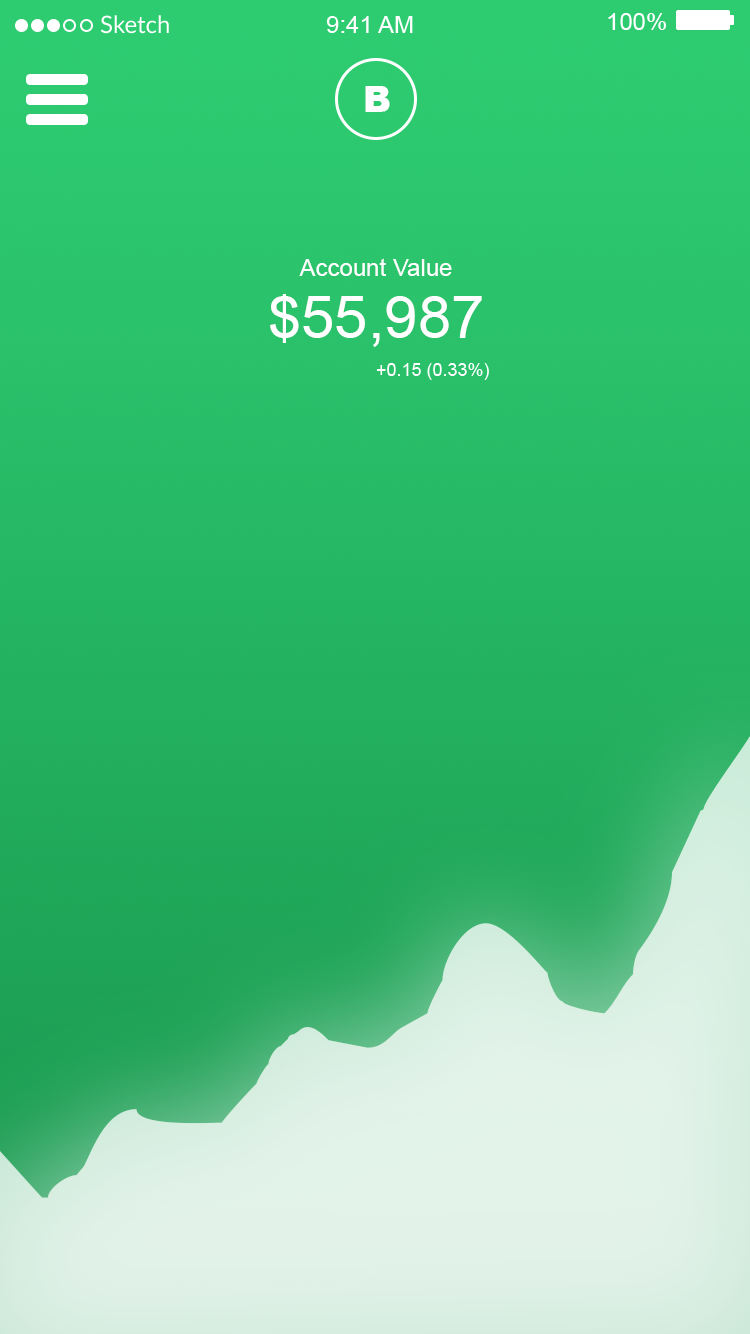
<style>
.page{position:relative;width:750px;height:1334px}
.page>*{position:absolute;margin:0}
.t1{font:36px "Arial-Black";color:#ffffff}
.t2{font:24px "ArialMT";color:#ffffff}
.t3{font:60px "ArialMT";color:#ffffff}
</style>
<div class="page">
<p class="t1" style="left:365px;top:86px;width:25px;height:26px">B</p>
<p class="t2" style="left:299px;top:258px;width:153px;height:18px">Account Value</p>
<p class="t3" style="left:270px;top:294px;width:212px;height:53px">$55,987</p>
</div>
